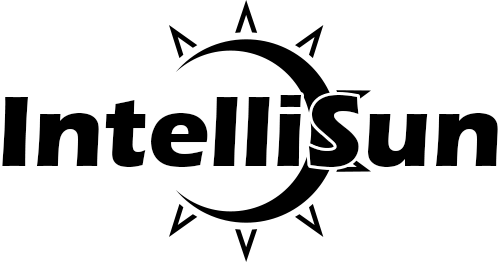
<style>
.page{position:relative;width:500px;height:262px;background:#ffffff}
.page>*{position:absolute;margin:0}
.t1{font:104px "ErasITC-Bold";color:#000000}
</style>
<div class="page">
<p class="t1" style="left:2px;top:95px;width:496px;height:72px">IntelliSun</p>
</div>
